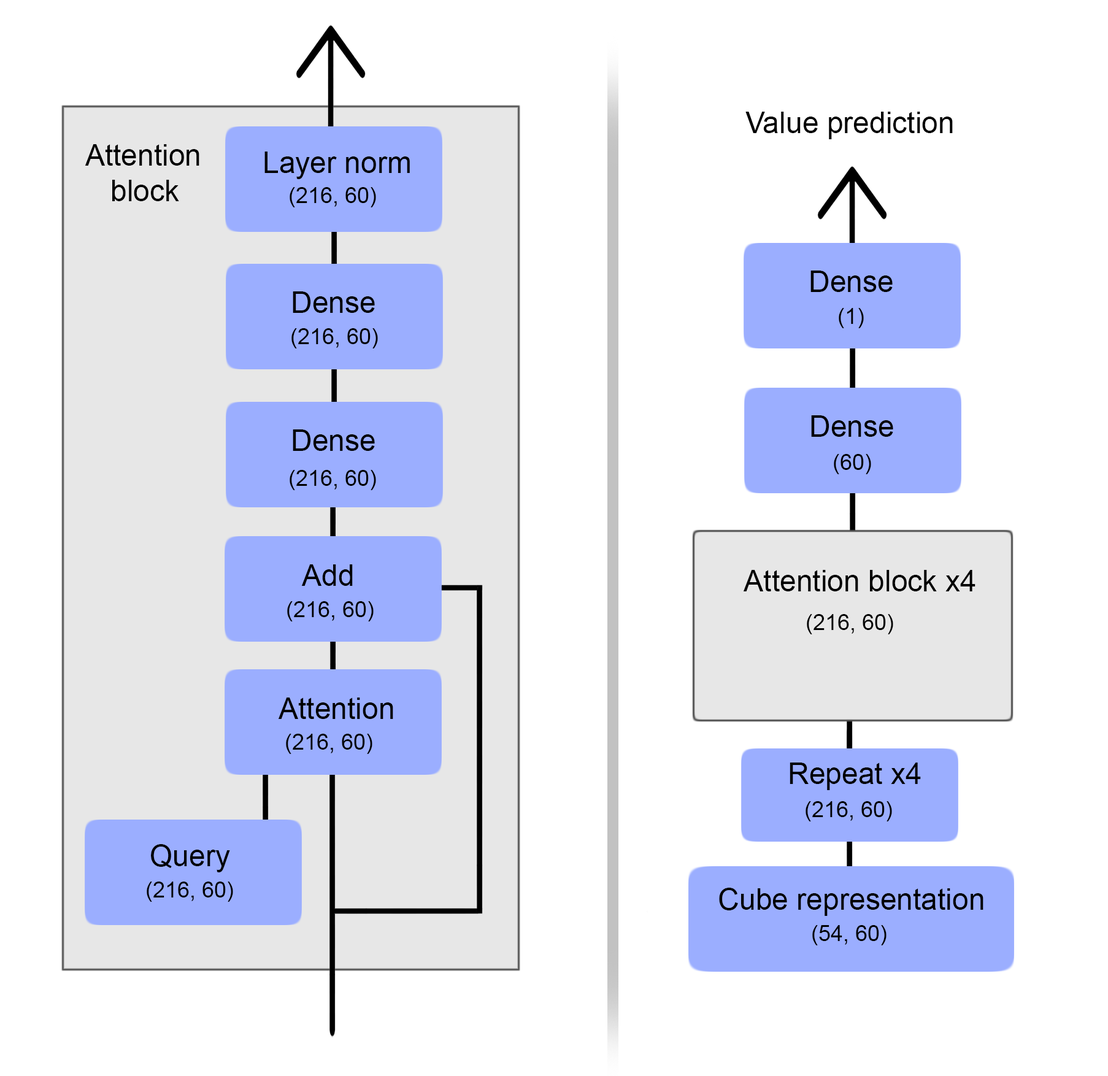
<style>
.page{position:relative;width:1108px;height:1076px;background:#ffffff}
.page>*{position:absolute;margin:0}
.t1{font:29.4px "ArialMT";color:#000000}
.t2{font:22.1px "ArialMT";color:#000000}
</style>
<div class="page">
<p class="t1" style="left:745px;top:112px;width:208px;height:27px">Value prediction</p>
<p class="t1" style="left:85px;top:144px;width:114px;height:57px;text-align:center">Attention<br>block</p>
<p class="t1" style="left:264px;top:152px;width:146px;height:27px">Layer norm</p>
<p class="t2" style="left:290px;top:187px;width:86px;height:20px">(216, 60)</p>
<p class="t1" style="left:810px;top:271px;width:83px;height:21px">Dense</p>
<p class="t1" style="left:293px;top:291px;width:82px;height:22px">Dense</p>
<p class="t2" style="left:839px;top:308px;width:25px;height:20px">(1)</p>
<p class="t2" style="left:291px;top:328px;width:87px;height:20px">(216, 60)</p>
<p class="t1" style="left:811px;top:415px;width:82px;height:22px">Dense</p>
<p class="t1" style="left:293px;top:429px;width:82px;height:22px">Dense</p>
<p class="t2" style="left:834px;top:454px;width:37px;height:20px">(60)</p>
<p class="t2" style="left:290px;top:470px;width:86px;height:20px">(216, 60)</p>
<p class="t1" style="left:301px;top:564px;width:52px;height:22px">Add</p>
<p class="t1" style="left:743px;top:570px;width:233px;height:21px">Attention block x4</p>
<p class="t2" style="left:287px;top:601px;width:87px;height:21px">(216, 60)</p>
<p class="t2" style="left:807px;top:614px;width:86px;height:20px">(216, 60)</p>
<p class="t1" style="left:278px;top:698px;width:115px;height:21px">Attention</p>
<p class="t2" style="left:286px;top:734px;width:86px;height:20px">(216, 60)</p>
<p class="t1" style="left:790px;top:763px;width:131px;height:27px">Repeat x4</p>
<p class="t2" style="left:806px;top:801px;width:86px;height:21px">(216, 60)</p>
<p class="t1" style="left:151px;top:844px;width:79px;height:28px">Query</p>
<p class="t2" style="left:147px;top:882px;width:86px;height:20px">(216, 60)</p>
<p class="t1" style="left:719px;top:888px;width:265px;height:28px">Cube representation</p>
<p class="t2" style="left:812px;top:925px;width:75px;height:20px">(54, 60)</p>
</div>
